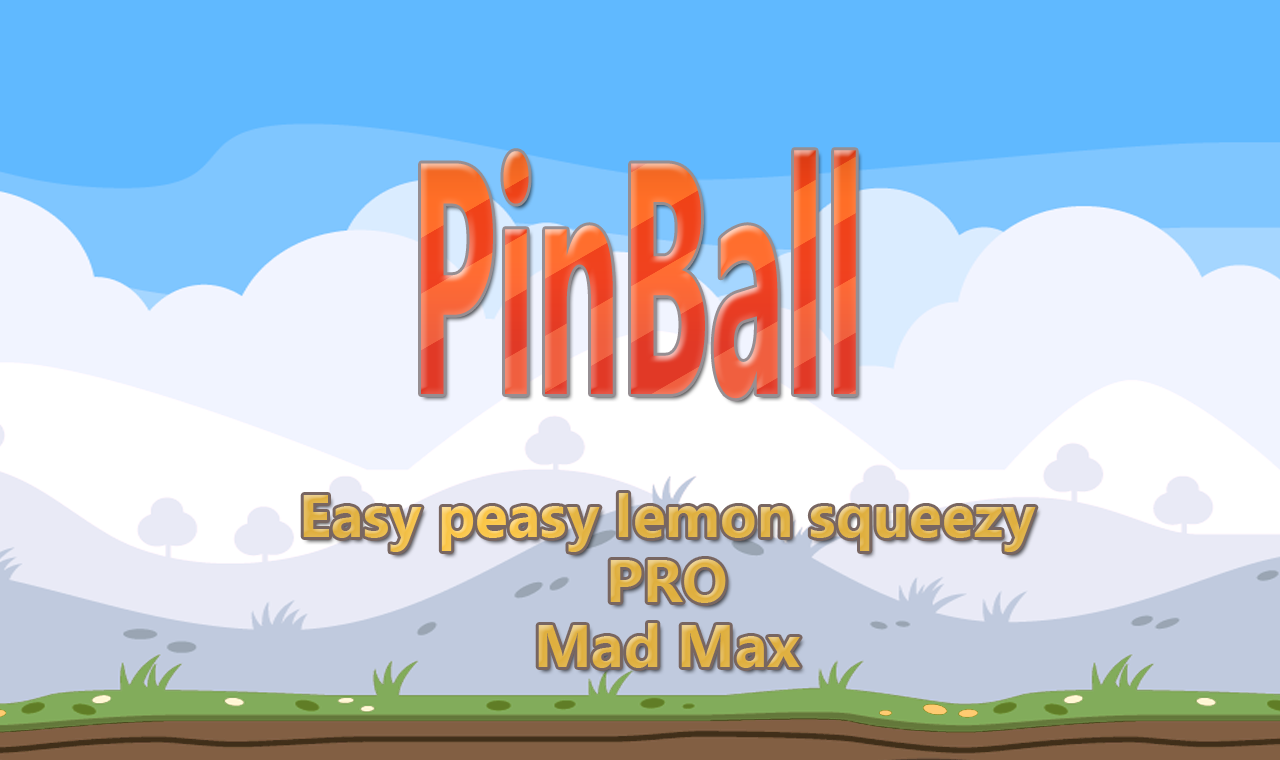
<style>
.page{position:relative;width:1280px;height:760px;background:#60b9ff}
.page>*{position:absolute;margin:0}
.t1{font:329.2px "Ebrima-Bold";scale:0.42 1}
.t2{font:60px/65px "Ebrima-Bold";color:#e1b54a}
</style>
<div class="page">
<p class="t1" style="left:421px;top:150px;width:435px;height:249px">PinBall</p>
<p class="t2" style="left:303px;top:493px;width:733px;height:175px;text-align:center">Easy peasy lemon squeezy<br>PRO<br>Mad Max</p>
</div>
